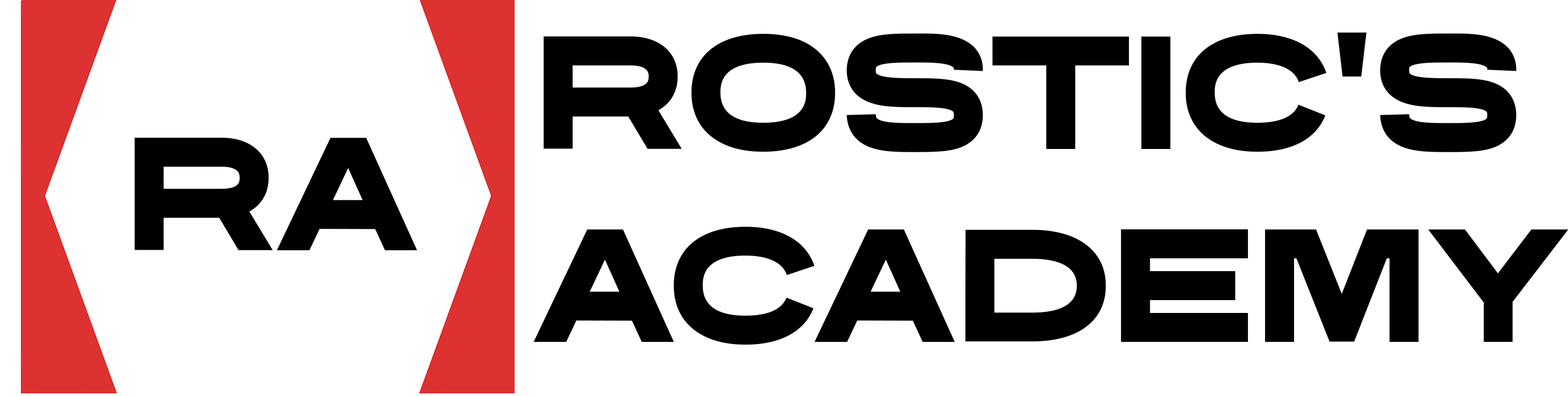
<style>
.page{position:relative;width:1568px;height:396px;background:#ffffff}
.page>*{position:absolute;margin:0}
.t1{font:160.8px "WidockTRIAL-Bold";color:#000000}
</style>
<div class="page">
<p class="t1" style="left:533px;top:32px;width:1036px;height:313px">ROSTIC’s<br>ACADEMY</p>
</div>
